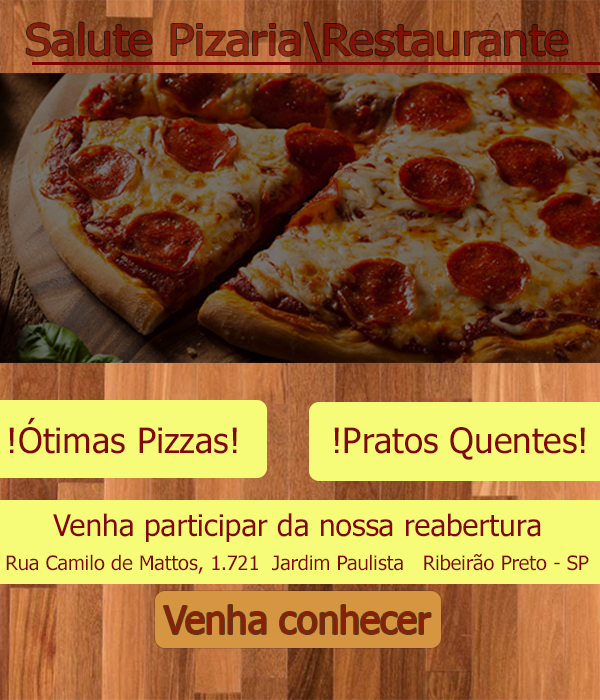
<style>
.page{position:relative;width:600px;height:700px}
.page>*{position:absolute;margin:0}
.t1{font:42.6px "Tahoma";color:#841909;scale:1.1 1}
.t2{font:35px "Tahoma";color:#830707}
.t3{font:29.6px "Tahoma";color:#830707}
.t4{font:20px "Tahoma";color:#830707}
.t5{font:38px "Tahoma";color:#8b2008}
</style>
<div class="page">
<p class="t1" style="left:26px;top:22px;width:542px;height:40px">Salute Pizaria\Restaurante</p>
<p class="t2" style="left:9px;top:417px;width:228px;height:37px">!Ótimas Pizzas!</p>
<p class="t2" style="left:334px;top:427px;width:251px;height:33px">!Pratos Quentes!</p>
<p class="t3" style="left:53px;top:513px;width:488px;height:29px">Venha participar da nossa reabertura</p>
<p class="t4" style="left:6px;top:554px;width:583px;height:20px">Rua Camilo de Mattos, 1.721  Jardim Paulista   Ribeirão Preto - SP</p>
<p class="t5" style="left:164px;top:605px;width:267px;height:29px">Venha conhecer</p>
</div>
